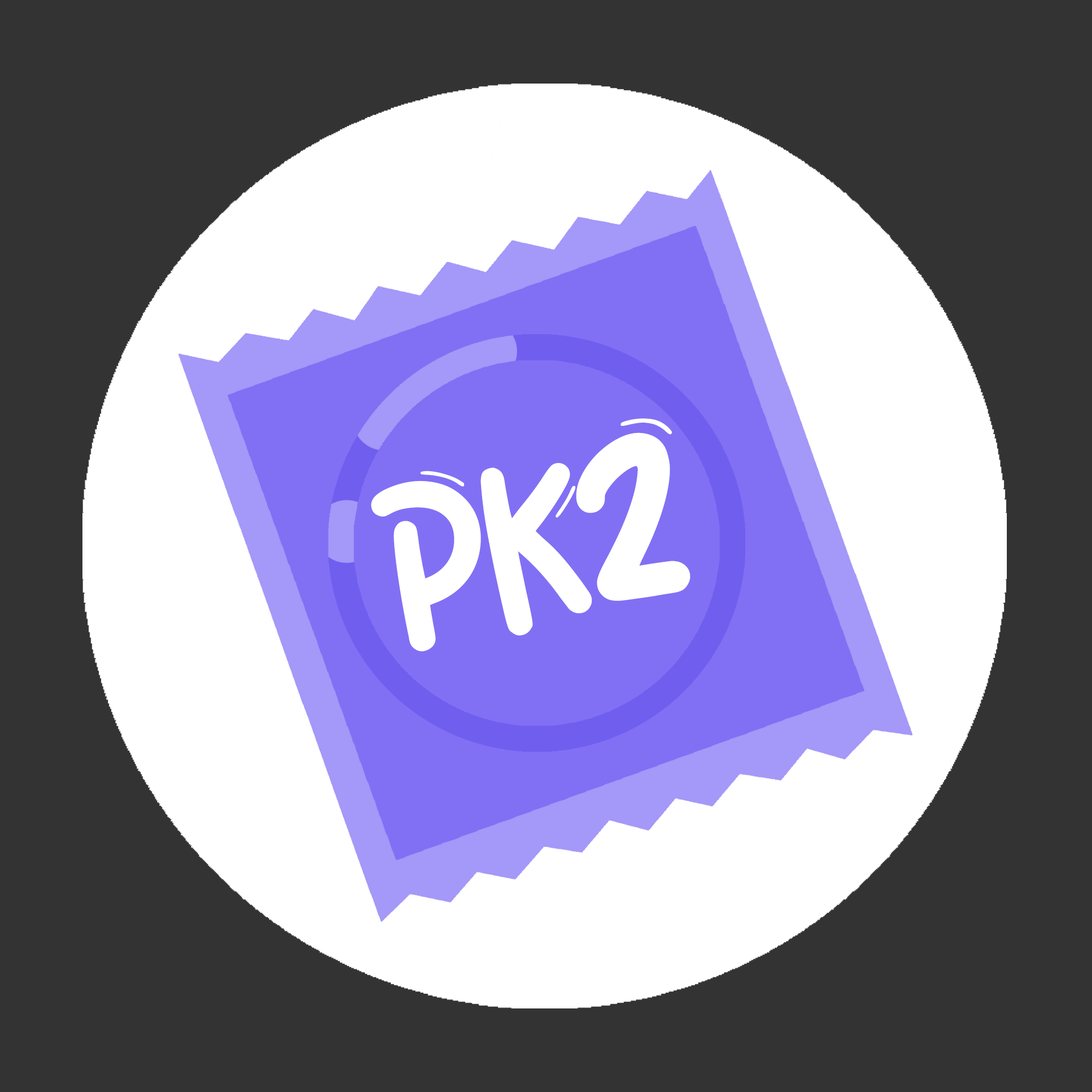
<style>
.page{position:relative;width:1092px;height:1092px;background:#333333}
.page>*{position:absolute;margin:0}
.t1{font:293.8px "Wigglye-Regular";color:#ffffff}
.t2{font:242.8px "Wigglye-Regular";color:#ffffff}
</style>
<div class="page">
<p class="t1" style="left:576px;top:418px;width:114px;height:183px;rotate:-13deg">2</p>
<p class="t2" style="left:371px;top:463px;width:221px;height:188px;rotate:-13deg">PK</p>
</div>
